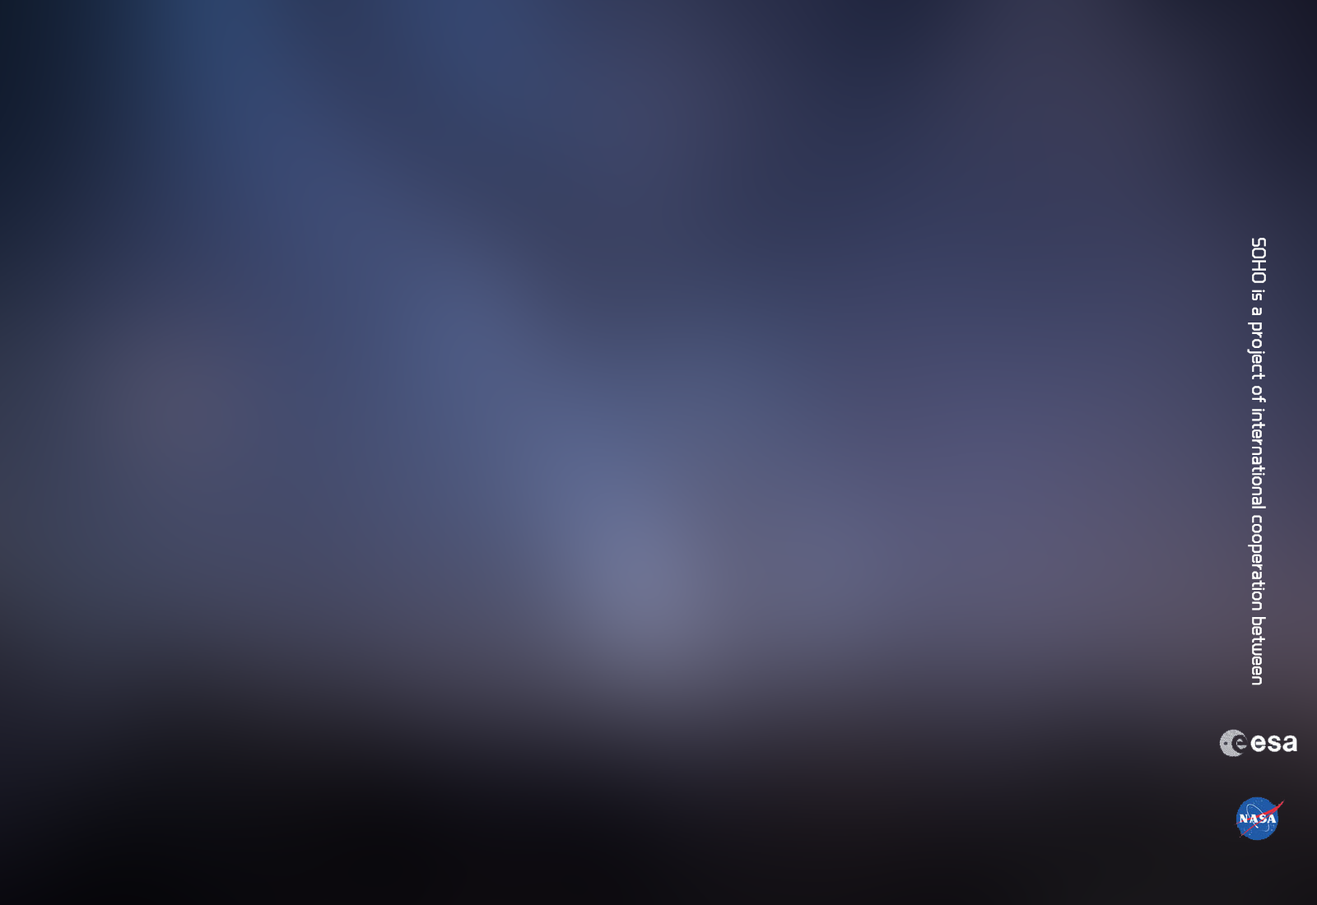
<style>
.page{position:relative;width:1317px;height:905px}
.page>*{position:absolute;margin:0}
.t1{font:19.8px "RTWSShangGoG0v1-Regular";letter-spacing:0.022em;color:#ffffff}
</style>
<div class="page">
<p class="t1" style="left:1247px;top:238px;width:19px;height:448px;rotate:90deg">SOHO is a project of international cooperation between</p>
</div>
